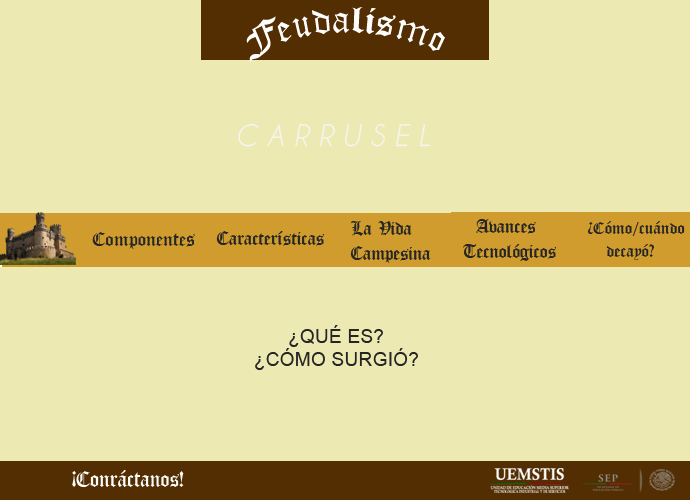
<style>
.page{position:relative;width:690px;height:500px;background:#ece9b3}
.page>*{position:absolute;margin:0}
.t1{font:41.7px "OldLondon";color:#fefefe}
.t2{font:13.9px "OldLondon";color:#fefefe}
.t3{font:27.8px "CaviarDreams-Italic";color:#f5f5f5}
.t4{font:20.8px "OldLondon";color:#252525}
.t5{font:19.4px "OldLondon";color:#252525}
.t6{font:22.2px "OldLondon";color:#252525}
.t7{font:19.4px "ArialMT";color:#252525}
.t8{font:19.4px "Corbel";color:#252525}
.t9{font:25px "OldLondon";color:#fefefe;scale:0.95 1}
</style>
<div class="page">
<p class="t1" style="left:246px;top:7px;width:199px;height:56px"><span class="t2"><br></span>Feudalismo</p>
<p class="t3" style="left:238px;top:123px;width:192px;height:24px">C A R R U S E L</p>
<p class="t4" style="left:350px;top:221px;width:81px;height:42px">La Vida <br>Campesina</p>
<p class="t4" style="left:463px;top:219px;width:93px;height:42px">Avances <br>Tecnológicos</p>
<p class="t5" style="left:587px;top:221px;width:98px;height:39px">¿Cómo/cuándo<br>   decayó?</p>
<p class="t6" style="left:92px;top:232px;width:103px;height:17px"><span class="t4">   </span>Componentes</p>
<p class="t4" style="left:216px;top:231px;width:108px;height:15px">Características</p>
<p class="t7" style="left:255px;top:325px;width:163px;height:45px"><span class="t8">      <br><br>       </span>¿QUÉ ES?<br>            ¿CÓMO SURGIÓ?</p>
<p class="t9" style="left:72px;top:470px;width:112px;height:17px">¡Conráctanos!</p>
</div>
